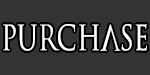
<style>
.page{position:relative;width:150px;height:75px;background:#333333}
.page>*{position:absolute;margin:0}
.t1{font:33.7px "SpaceandAstronomy";color:#ffffff;scale:0.74 1}
</style>
<div class="page">
<p class="t1" style="left:3px;top:24px;width:144px;height:27px">Purchase</p>
</div>
